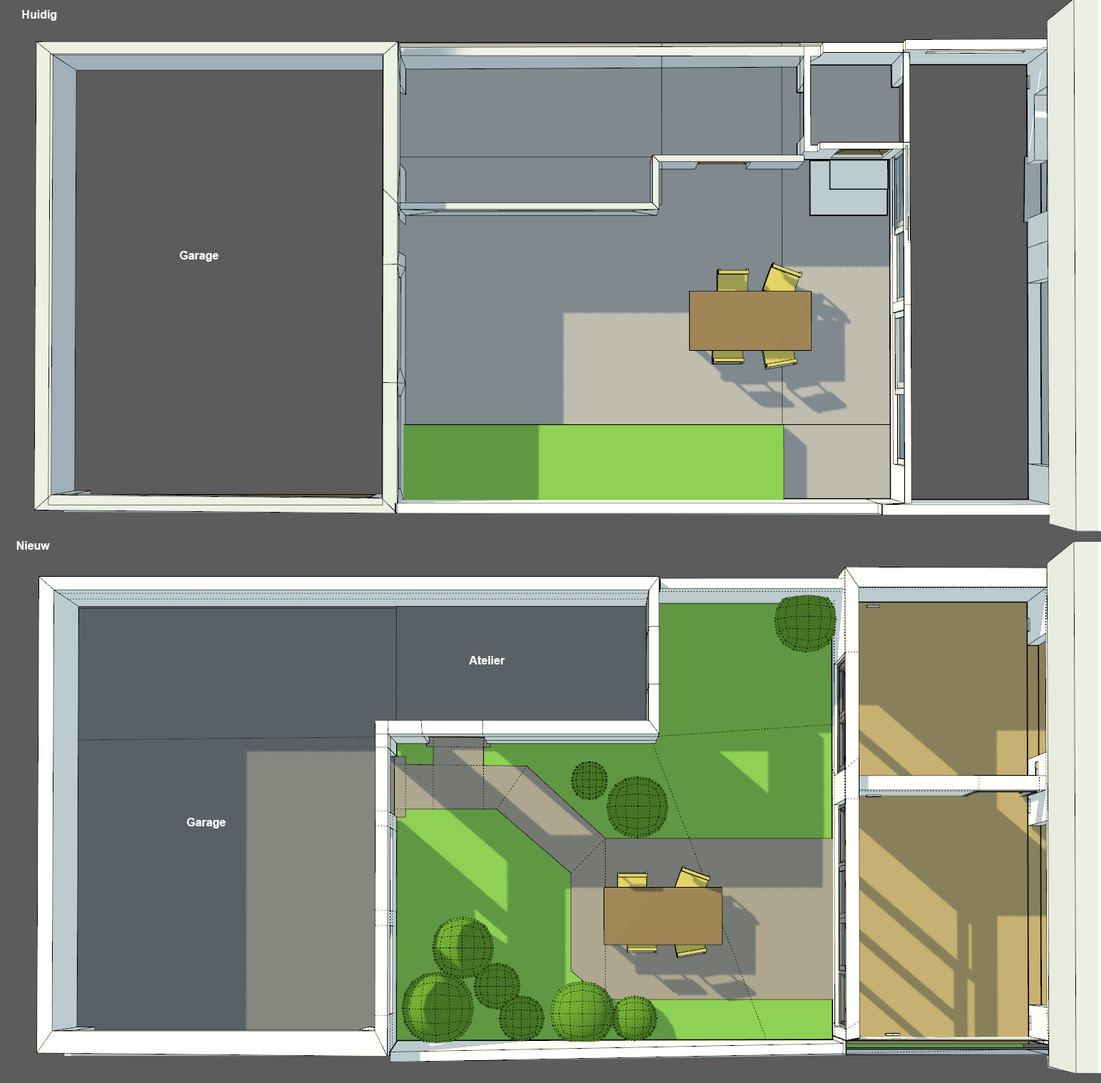
<style>
.page{position:relative;width:1101px;height:1083px;background:#5c5c5c}
.page>*{position:absolute;margin:0}
.t1{font:11.4px "Arial-BoldMT";color:#ffffff}
</style>
<div class="page">
<p class="t1" style="left:22px;top:10px;width:35px;height:11px">Huidig</p>
<p class="t1" style="left:180px;top:251px;width:39px;height:11px">Garage</p>
<p class="t1" style="left:16px;top:541px;width:34px;height:9px">Nieuw</p>
<p class="t1" style="left:469px;top:656px;width:36px;height:8px">Atelier</p>
<p class="t1" style="left:187px;top:818px;width:39px;height:10px">Garage</p>
</div>
